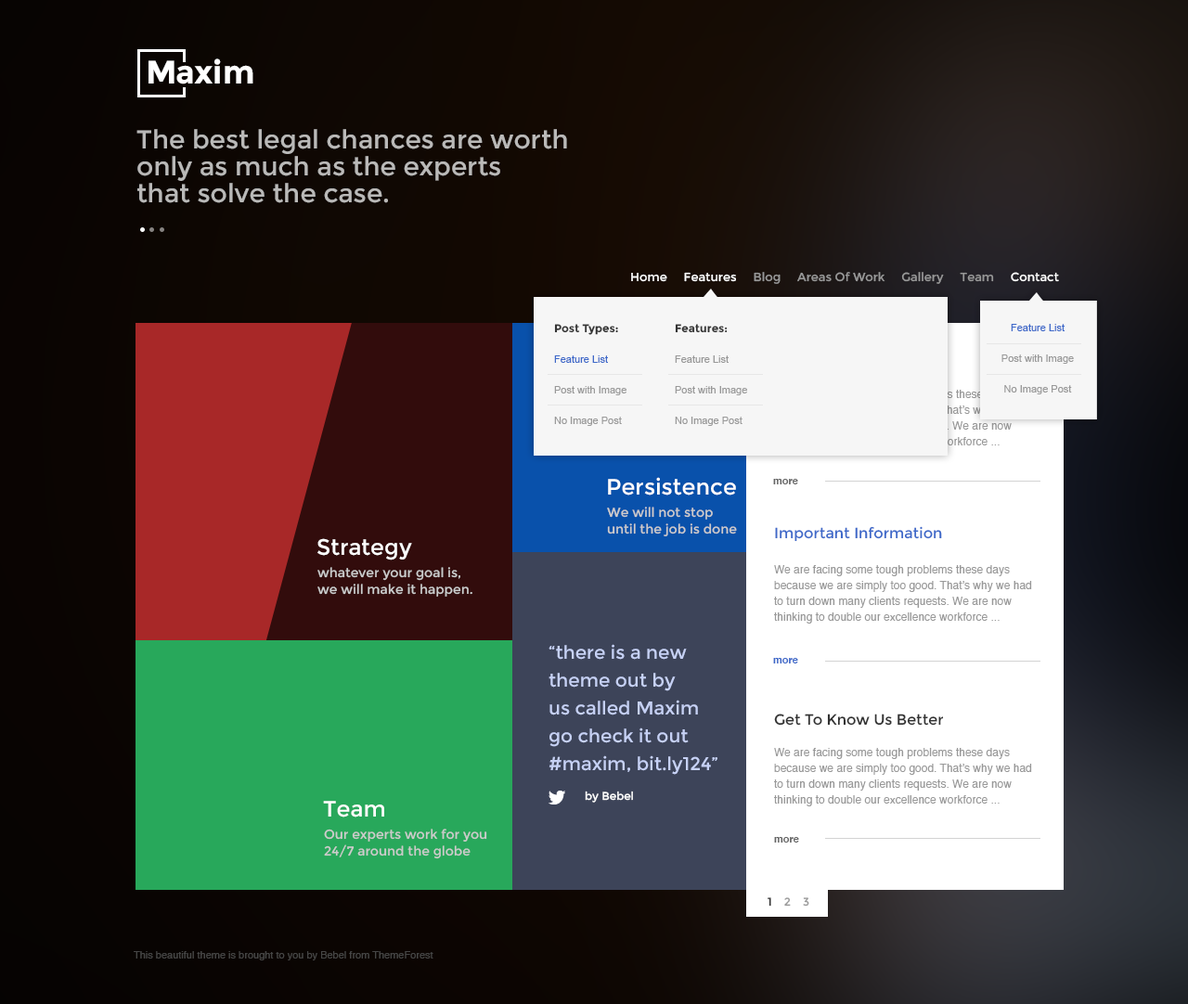
<style>
.page{position:relative;width:1188px;height:1004px}
.page>*{position:absolute;margin:0}
.t1{font:32.5px "Montserrat-Bold";color:#ffffff}
.t2{font:26px/26.9px "Montserrat-Regular";color:#bab9b8}
.t3{font:12.1px "Montserrat-Regular";color:#999999}
.t4{font:12.1px "Montserrat-Regular";color:#ffffff}
.t5{font:10.2px/30.6px "ArialMT";color:#999999}
.t6{font:11.1px/30.6px "Montserrat-Bold";color:#333333}
.t7{font:10.2px/30.6px "ArialMT";color:#3e69c9}
.t8{font:11.1px/15.8px "Helvetica";color:#f6f6f6}
.t9{font:22.3px "Montserrat-Regular";color:#ffffff}
.t10{font:10.2px "Helvetica-Bold";color:#666666}
.t11{font:13px/16.7px "Montserrat-Regular";color:#cccccc}
.t12{font:14.8px "Montserrat-Regular";color:#3e69c9}
.t13{font:11.1px/15.8px "Helvetica";color:#999999}
.t14{font:18.6px/27.8px "Montserrat-Regular";color:#c6d1f5}
.t15{font:10.2px "Helvetica-Bold";color:#3e69c9}
.t16{font:14.8px "Montserrat-Regular";color:#323232}
.t17{font:11.1px "Montserrat-Regular";color:#ffffff}
.t18{font:11.1px "Montserrat-Regular";color:#999999}
.t19{font:11.1px "Montserrat-Regular";color:#323232}
.t20{font:10.2px "Helvetica";color:#454545}
</style>
<div class="page">
<p class="t1" style="left:148px;top:60px;width:26px;height:24px">M</p>
<p class="t1" style="left:194px;top:58px;width:59px;height:26px">xim</p>
<p class="t2" style="left:136px;top:129px;width:431px;height:74px">The best legal chances are worth <br>only as much as the experts <br>that solve the case.</p>
<p class="t3" style="left:631px;top:272px;width:428px;height:12px"><span class="t4">Home     Features</span>     Blog     Areas Of Work     Gallery     Team     <span class="t4">Contact</span></p>
<p class="t5" style="left:554px;top:324px;width:72px;height:102px"><span class="t6">Post Types:<br></span><span class="t7">Feature List<br></span>Post with Image<br>No Image Post</p>
<p class="t5" style="left:675px;top:324px;width:72px;height:102px"><span class="t6">Features:<br></span>Feature List<br>Post with Image<br>No Image Post</p>
<p class="t5" style="left:1001px;top:324px;width:73px;height:70px;text-align:center"><span class="t7">Feature List<br></span>Post with Image<br>No Image Post</p>
<p class="t8" style="left:774px;top:390px;width:258px;height:58px">We are facing some tough problems these days because we are simply too good. That’s why we had to turn down many clients requests. We are now thinking to double our excellence workforce ...</p>
<p class="t9" style="left:608px;top:477px;width:128px;height:18px">Persistence</p>
<p class="t10" style="left:773px;top:479px;width:25px;height:5px">more</p>
<p class="t11" style="left:607px;top:507px;width:130px;height:29px">We will not stop <br>until the job is done</p>
<p class="t12" style="left:775px;top:526px;width:167px;height:16px">Important Information</p>
<p class="t9" style="left:317px;top:538px;width:95px;height:22px">Strategy</p>
<p class="t11" style="left:317px;top:567px;width:155px;height:30px">whatever your goal is, <br>we will make it happen.</p>
<p class="t13" style="left:774px;top:565px;width:258px;height:59px">We are facing some tough problems these days because we are simply too good. That’s why we had to turn down many clients requests. We are now thinking to double our excellence workforce ...</p>
<p class="t14" style="left:548px;top:644px;width:169px;height:131px">“there is a new<br>theme out by<br>us called Maxim<br>go check it out<br>#maxim, bit.ly124”</p>
<p class="t15" style="left:773px;top:658px;width:25px;height:5px">more</p>
<p class="t16" style="left:774px;top:714px;width:170px;height:12px">Get To Know Us Better</p>
<p class="t13" style="left:774px;top:748px;width:258px;height:58px">We are facing some tough problems these days because we are simply too good. That’s why we had to turn down many clients requests. We are now thinking to double our excellence workforce ...</p>
<p class="t17" style="left:585px;top:791px;width:48px;height:12px">by Bebel</p>
<p class="t9" style="left:323px;top:801px;width:61px;height:16px">Team</p>
<p class="t11" style="left:324px;top:829px;width:163px;height:30px">Our experts work for you<br>24/7 around the globe</p>
<p class="t10" style="left:774px;top:837px;width:25px;height:6px">more</p>
<p class="t18" style="left:767px;top:897px;width:42px;height:10px"><span class="t19">1    </span>2    3</p>
<p class="t20" style="left:134px;top:951px;width:299px;height:9px">This beautiful theme is brought to you by Bebel from ThemeForest</p>
</div>
